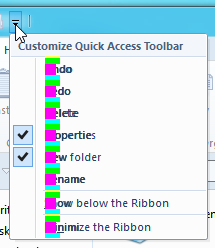
<style>
.page{position:relative;width:215px;height:248px;background:#fcfcfc}
.page>*{position:absolute;margin:0}
.t1{font:11px/22px "SegoeUI";letter-spacing:0.025em;color:#254264}
.t2{font:11px/24px "SegoeUI";letter-spacing:0.025em;color:#254264}
</style>
<div class="page">
<p class="t1" style="left:45px;top:65px;width:47px;height:166px">Undo<br>Redo<br>Delete<br>Propertie<br>New<br>Rename<span class="t2"><br>S</span>how<span class="t2"><br>M</span>inimi</p>
</div>
